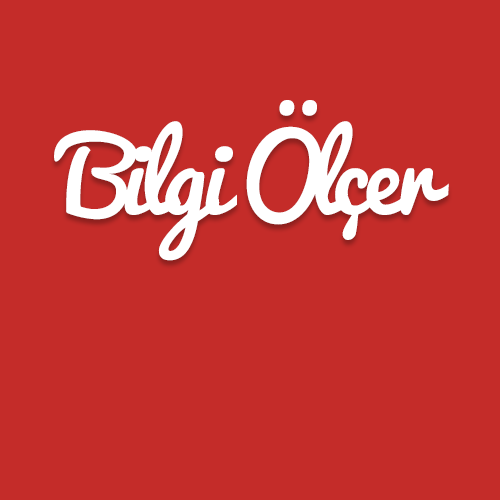
<style>
.page{position:relative;width:500px;height:500px;background:#c42c29}
.page>*{position:absolute;margin:0}
.t1{font:100px "Pacifico-Regular";letter-spacing:-0.06em;color:#ffffff}
</style>
<div class="page">
<p class="t1" style="left:54px;top:100px;width:395px;height:161px">Bilgi Ölçer</p>
</div>
